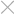
<style>
.page{position:relative;width:15px;height:15px;background:#ffffff}
.page>*{position:absolute;margin:0}
.t1{font:20.3px "bubbleboddylight-Light";color:#a8a8a8}
</style>
<div class="page">
<p class="t1" style="left:1px;top:0px;width:13px;height:14px">X</p>
</div>
